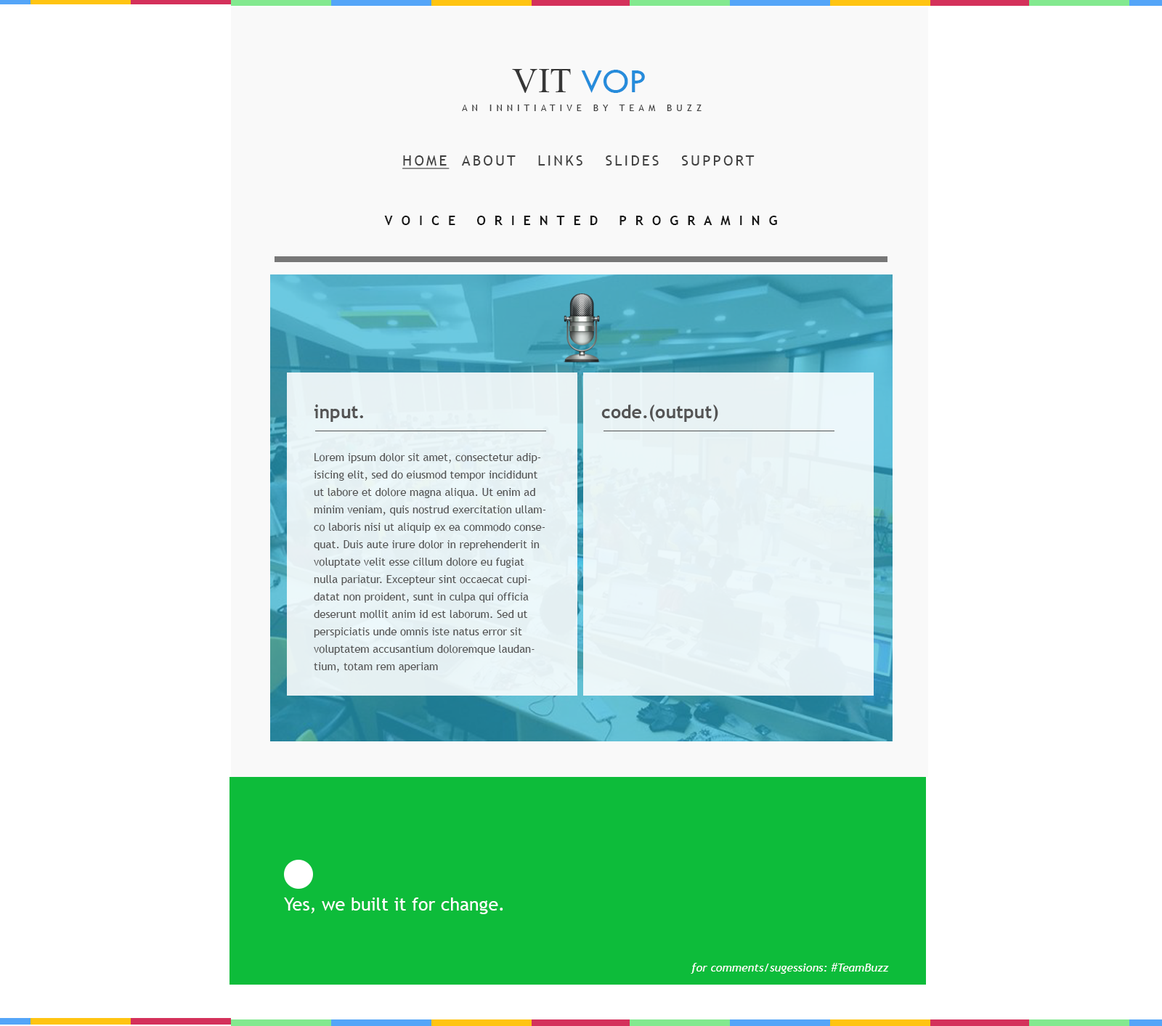
<style>
.page{position:relative;width:1162px;height:1026px;background:#ffffff}
.page>*{position:absolute;margin:0}
.t1{font:35.6px "TimesNewRomanPSMT";color:#363636;text-transform:uppercase}
.t2{font:35.6px "TwCenMT-Regular";color:#268cdb;text-transform:uppercase}
.t3{font:9.4px "TrebuchetMS";letter-spacing:0.46em;color:#404040;text-transform:uppercase}
.t4{font:14.5px "TrebuchetMS";letter-spacing:0.16em;color:#404040;text-transform:uppercase}
.t5{font:14.5px "TrebuchetMS";letter-spacing:0.16em;color:#404040;text-transform:uppercase;text-decoration:underline}
.t6{font:13.1px "TrebuchetMS-Bold";letter-spacing:0.66em;color:#181818;text-transform:uppercase}
.t7{font:18.2px "TrebuchetMS-Bold";color:#545454}
.t8{font:10.9px/17.4px "TrebuchetMS";color:#545454}
.t9{font:18.2px "TrebuchetMS";color:#ffffff}
.t10{font:11.6px "TrebuchetMS-Italic";color:#ffffff}
</style>
<div class="page">
<p class="t1" style="left:512px;top:69px;width:133px;height:24px">VIT <span class="t2">VOP</span></p>
<p class="t3" style="left:462px;top:105px;width:240px;height:6px">an innitiative by team buzz</p>
<p class="t4" style="left:402px;top:155px;width:353px;height:14px"><span class="t5">Home</span>  about   links   slides   support</p>
<p class="t6" style="left:384px;top:216px;width:393px;height:9px">Voice oriented programing</p>
<p class="t7" style="left:314px;top:405px;width:49px;height:17px">input.</p>
<p class="t7" style="left:601px;top:405px;width:117px;height:17px">code.(output)</p>
<p class="t8" style="left:314px;top:453px;width:232px;height:220px">Lorem ipsum dolor sit amet, consectetur adipisicing elit, sed do eiusmod tempor incididunt ut labore et dolore magna aliqua. Ut enim ad minim veniam, quis nostrud exercitation ullamco laboris nisi ut aliquip ex ea commodo consequat. Duis aute irure dolor in reprehenderit in voluptate velit esse cillum dolore eu fugiat nulla pariatur. Excepteur sint occaecat cupidatat non proident, sunt in culpa qui officia deserunt mollit anim id est laborum. Sed ut perspiciatis unde omnis iste natus error sit voluptatem accusantium doloremque laudantium, totam rem aperiam</p>
<p class="t9" style="left:284px;top:898px;width:219px;height:16px">Yes, we built it for change.</p>
<p class="t10" style="left:691px;top:963px;width:198px;height:11px">for comments/sugessions: #TeamBuzz</p>
</div>
